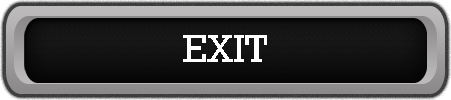
<style>
.page{position:relative;width:451px;height:100px}
.page>*{position:absolute;margin:0}
.t1{font:39.8px "Rockwell";color:#ffffff}
</style>
<div class="page">
<p class="t1" style="left:183px;top:35px;width:84px;height:27px">EXIT</p>
</div>
